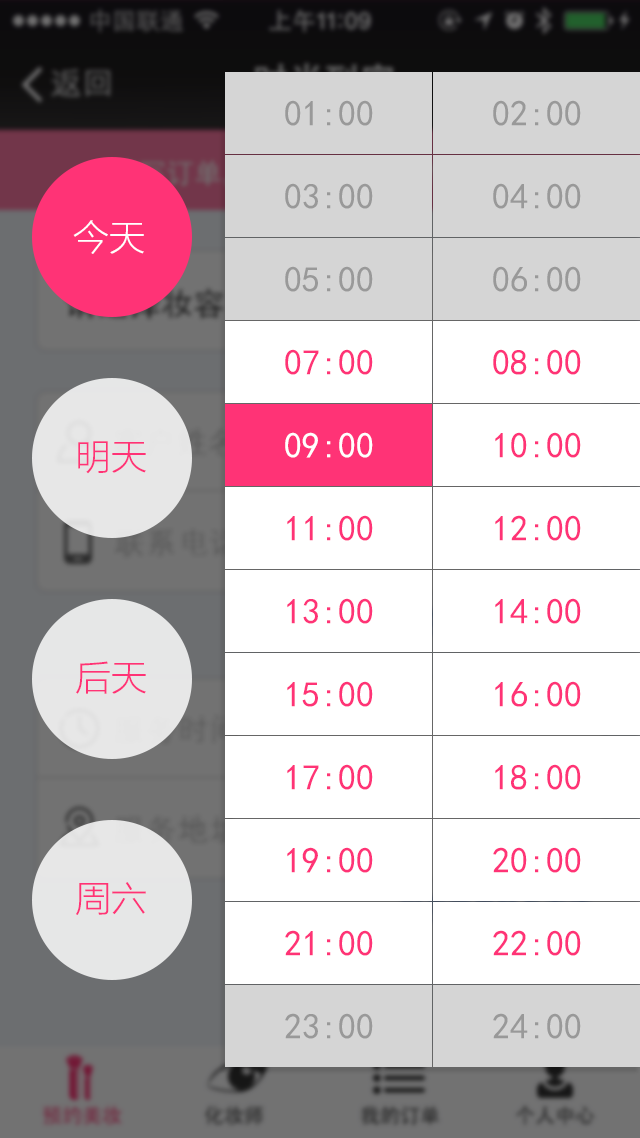
<style>
.page{position:relative;width:640px;height:1138px;background:#ffffff}
.page>*{position:absolute;margin:0}
.t1{font:36px "SimHei";color:#999999}
.t2{font:36px "FZLTXHJW--GB1-0";color:#ffffff}
.t3{font:36px "SimHei";color:#ff3376}
.t4{font:36px "SimHei";color:#ffffff}
.t5{font:36px "FZLTXHJW--GB1-0";color:#ff3376}
</style>
<div class="page">
<p class="t1" style="left:285px;top:100px;width:88px;height:26px">01:00</p>
<p class="t1" style="left:493px;top:100px;width:88px;height:26px">02:00</p>
<p class="t1" style="left:285px;top:183px;width:88px;height:26px">03:00</p>
<p class="t1" style="left:493px;top:183px;width:88px;height:26px">04:00</p>
<p class="t2" style="left:73px;top:220px;width:71px;height:34px">今天</p>
<p class="t1" style="left:285px;top:266px;width:88px;height:26px">05:00</p>
<p class="t1" style="left:493px;top:266px;width:88px;height:26px">06:00</p>
<p class="t3" style="left:285px;top:349px;width:88px;height:26px">07:00</p>
<p class="t3" style="left:493px;top:349px;width:88px;height:26px">08:00</p>
<p class="t4" style="left:285px;top:432px;width:88px;height:26px">09:00</p>
<p class="t3" style="left:495px;top:432px;width:86px;height:26px">10:00</p>
<p class="t5" style="left:78px;top:441px;width:68px;height:33px">明天</p>
<p class="t3" style="left:287px;top:515px;width:86px;height:26px">11:00</p>
<p class="t3" style="left:495px;top:515px;width:86px;height:26px">12:00</p>
<p class="t3" style="left:287px;top:598px;width:86px;height:26px">13:00</p>
<p class="t3" style="left:495px;top:598px;width:86px;height:26px">14:00</p>
<p class="t5" style="left:76px;top:661px;width:70px;height:33px">后天</p>
<p class="t3" style="left:287px;top:681px;width:86px;height:26px">15:00</p>
<p class="t3" style="left:495px;top:681px;width:86px;height:26px">16:00</p>
<p class="t3" style="left:287px;top:764px;width:86px;height:26px">17:00</p>
<p class="t3" style="left:495px;top:764px;width:86px;height:26px">18:00</p>
<p class="t3" style="left:287px;top:847px;width:86px;height:26px">19:00</p>
<p class="t3" style="left:493px;top:847px;width:88px;height:26px">20:00</p>
<p class="t5" style="left:76px;top:882px;width:70px;height:33px">周六</p>
<p class="t3" style="left:285px;top:930px;width:88px;height:26px">21:00</p>
<p class="t3" style="left:493px;top:930px;width:88px;height:26px">22:00</p>
<p class="t1" style="left:285px;top:1013px;width:88px;height:26px">23:00</p>
<p class="t1" style="left:493px;top:1013px;width:88px;height:26px">24:00</p>
</div>
